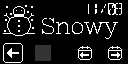
<style>
.page{position:relative;width:128px;height:64px;background:#000000}
.page>*{position:absolute;margin:0}
.t1{font:16px "7SEGMENTALDIGITALDISPLAY";color:#ffffff}
.t2{font:23px "NixieOne-Regular";color:#ffffff}
</style>
<div class="page">
<p class="t1" style="left:88px;top:2px;width:35px;height:13px">11/08</p>
<p class="t2" style="left:42px;top:17px;width:77px;height:22px">Snowy</p>
</div>
